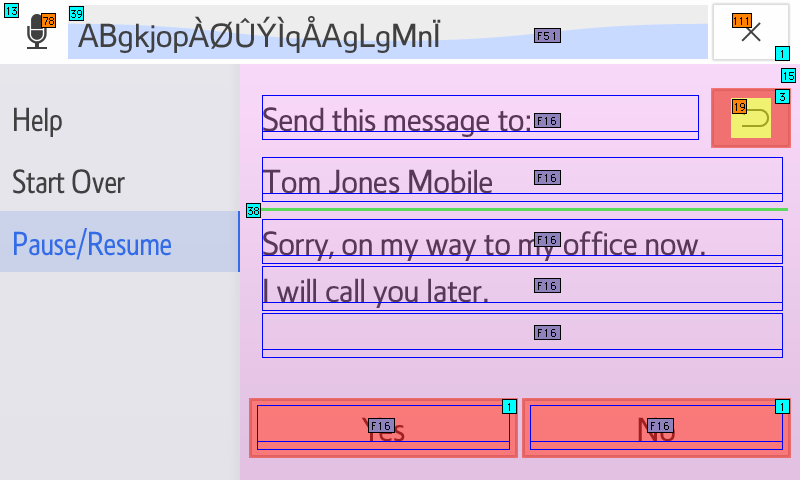
<style>
.page{position:relative;width:800px;height:480px}
.page>*{position:absolute;margin:0}
.t1{font:30px "Tfont1502_T1S";color:#404041}
.t2{font:30px "Tfont1502_T2S";color:#404041}
.t3{font:30px/62px "Tfont1502_T1S";color:#583859}
.t4{font:30px "Tfont1502_T2S";color:#336ce6}
.t5{font:30px/47px "Tfont1502_T1S";color:#583859}
.t6{font:30px "Tfont1502_T1S"}
</style>
<div class="page">
<p class="t1" style="left:78px;top:16px;width:363px;height:37px">ABgkjopÀØÛÝÌqÅAgLgMnÏ</p>
<p class="t2" style="left:14px;top:107px;width:48px;height:30px">Help</p>
<p class="t3" style="left:262px;top:107px;width:268px;height:87px">Send this message to:<br>Tom Jones Mobile</p>
<p class="t2" style="left:13px;top:169px;width:112px;height:25px">Start Over</p>
<p class="t4" style="left:14px;top:228px;width:157px;height:32px">Pause/Resume</p>
<p class="t5" style="left:263px;top:231px;width:442px;height:77px">Sorry, on my way to my office now.<br>I will call you later.</p>
<p class="t6" style="left:361px;top:417px;width:44px;height:25px">Yes</p>
<p class="t6" style="left:638px;top:417px;width:37px;height:25px">No</p>
</div>
